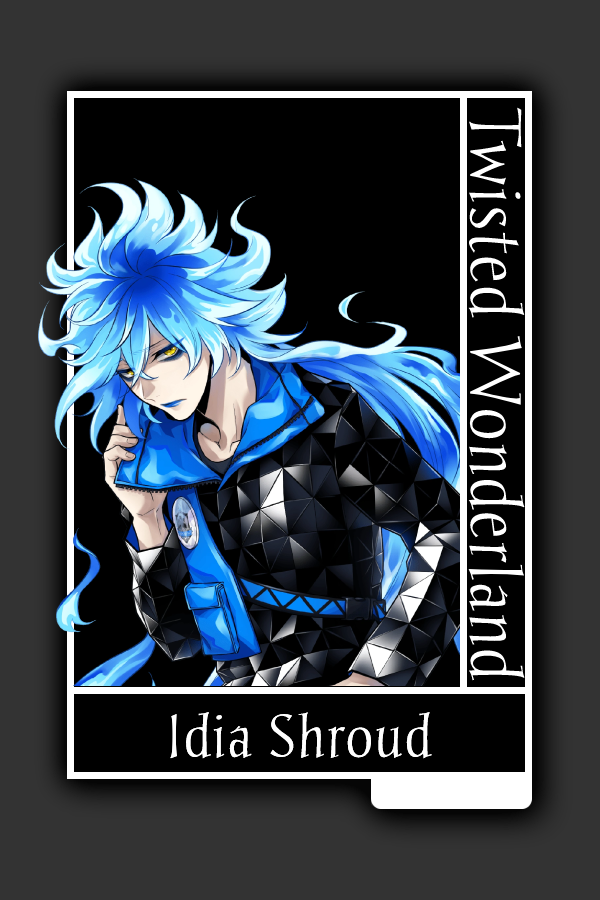
<style>
.page{position:relative;width:600px;height:900px;background:#000000}
.page>*{position:absolute;margin:0}
.t1{font:60px "Chantelli-Antiqua";color:#ffffff}
.t2{font:50px "Chantelli-Antiqua";color:#ffffff}
</style>
<div class="page">
<p class="t1" style="left:468px;top:107px;width:57px;height:574px;rotate:90deg">Twisted Wonderland</p>
<p class="t2" style="left:170px;top:712px;width:262px;height:47px">Idia Shroud</p>
<p class="t2" style="left:170px;top:712px;width:262px;height:47px">Idia Shroud</p>
</div>
